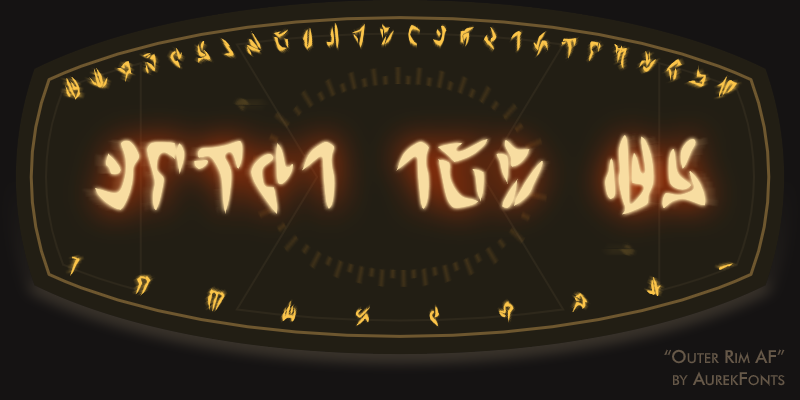
<style>
.page{position:relative;width:800px;height:400px;background:#221e14}
.page>*{position:absolute;margin:0}
.t1{font:82px "OuterRimAF-Regular";color:#f8dda1}
.t2{font:18px "FuturaBT-Medium";color:#665848;font-variant:small-caps}
</style>
<div class="page">
<p class="t1" style="left:95px;top:135px;width:611px;height:80px;opacity:0.61">Outer rim AF</p>
<p class="t1" style="left:95px;top:135px;width:611px;height:80px">Outer rim AF</p>
<p class="t2" style="left:664px;top:349px;width:121px;height:37px;text-align:right">“Outer Rim AF”<br>by AurekFonts</p>
</div>
